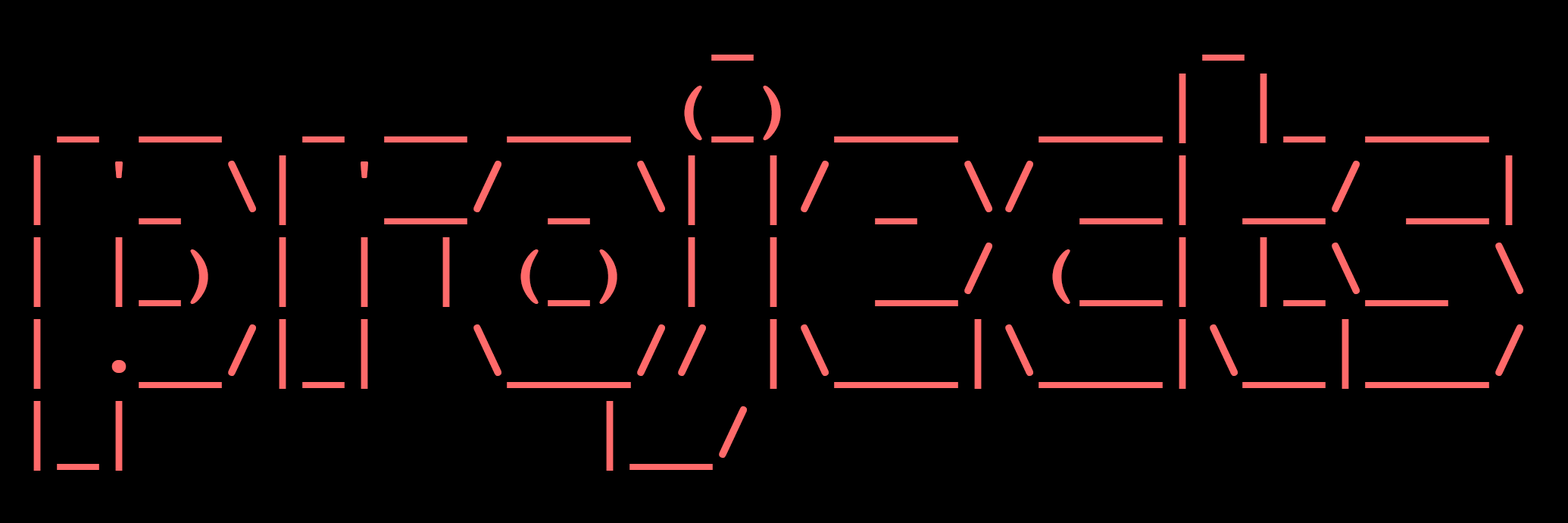
<style>
.page{position:relative;width:1568px;height:523px;background:#000000}
.page>*{position:absolute;margin:0}
.t1{font:68.2px "Courier-Bold";color:#ff6a6a}
</style>
<div class="page">
<p class="t1" style="left:33px;top:55px;width:1490px;height:415px">_           _<br> _ __  _ __ ___ (_) ___  ___| |_ ___<br>| '_ \| '__/ _ \| |/ _ \/ __| __/ __|<br>| |_) | | | (_) | |  __/ (__| |_\__ \<br>| .__/|_|  \___// |\___|\___|\__|___/<br>|_|           |__/</p>
</div>
